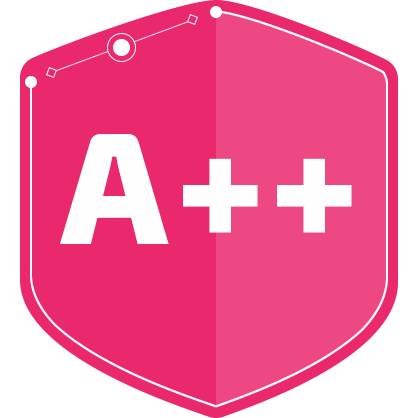
<style>
.page{position:relative;width:418px;height:418px;background:#ea286e}
.page>*{position:absolute;margin:0}
.t1{font:160.1px "Exo2.0-ExtraBold";letter-spacing:0.06em;color:#fefefe}
</style>
<div class="page">
<p class="t1" style="left:60px;top:134px;width:292px;height:110px">A++</p>
</div>
